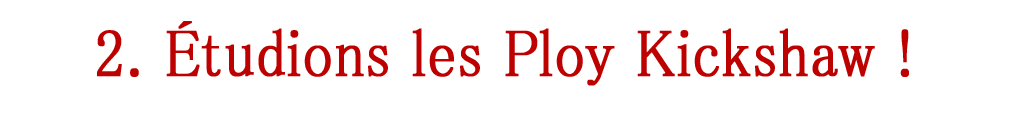
<style>
.page{position:relative;width:1009px;height:113px;background:#ffffff}
.page>*{position:absolute;margin:0}
.t1{font:66.6px "MS-PMincho";color:#bd0000;font-weight:bold;scale:0.89 1}
</style>
<div class="page">
<p class="t1" style="left:97px;top:21px;width:812px;height:65px">2. Étudions les Ploy Kickshaw !</p>
</div>
